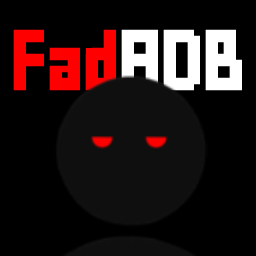
<style>
.page{position:relative;width:256px;height:256px;background:#000000}
.page>*{position:absolute;margin:0}
.t1{font:48px "FFFForward";color:#ff0000}
.t2{font:48px "FFFForward";color:#ffffff}
</style>
<div class="page">
<p class="t1" style="left:13px;top:29px;width:229px;height:62px">Fad<span class="t2">ADB</span></p>
</div>
